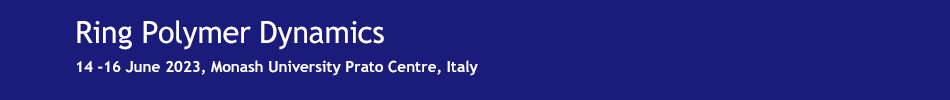
<style>
.page{position:relative;width:950px;height:100px;background:#1b1b7b}
.page>*{position:absolute;margin:0}
.t1{font:30.5px "TrebuchetMS";letter-spacing:-0.01em;color:#ffffff}
.t2{font:15.2px "TrebuchetMS-Bold";color:#ffffff}
</style>
<div class="page">
<p class="t1" style="left:77px;top:20px;width:307px;height:30px">Ring Polymer Dynamics</p>
<p class="t2" style="left:77px;top:60px;width:401px;height:16px">14 -16 June 2023, Monash University Prato Centre, Italy</p>
</div>
